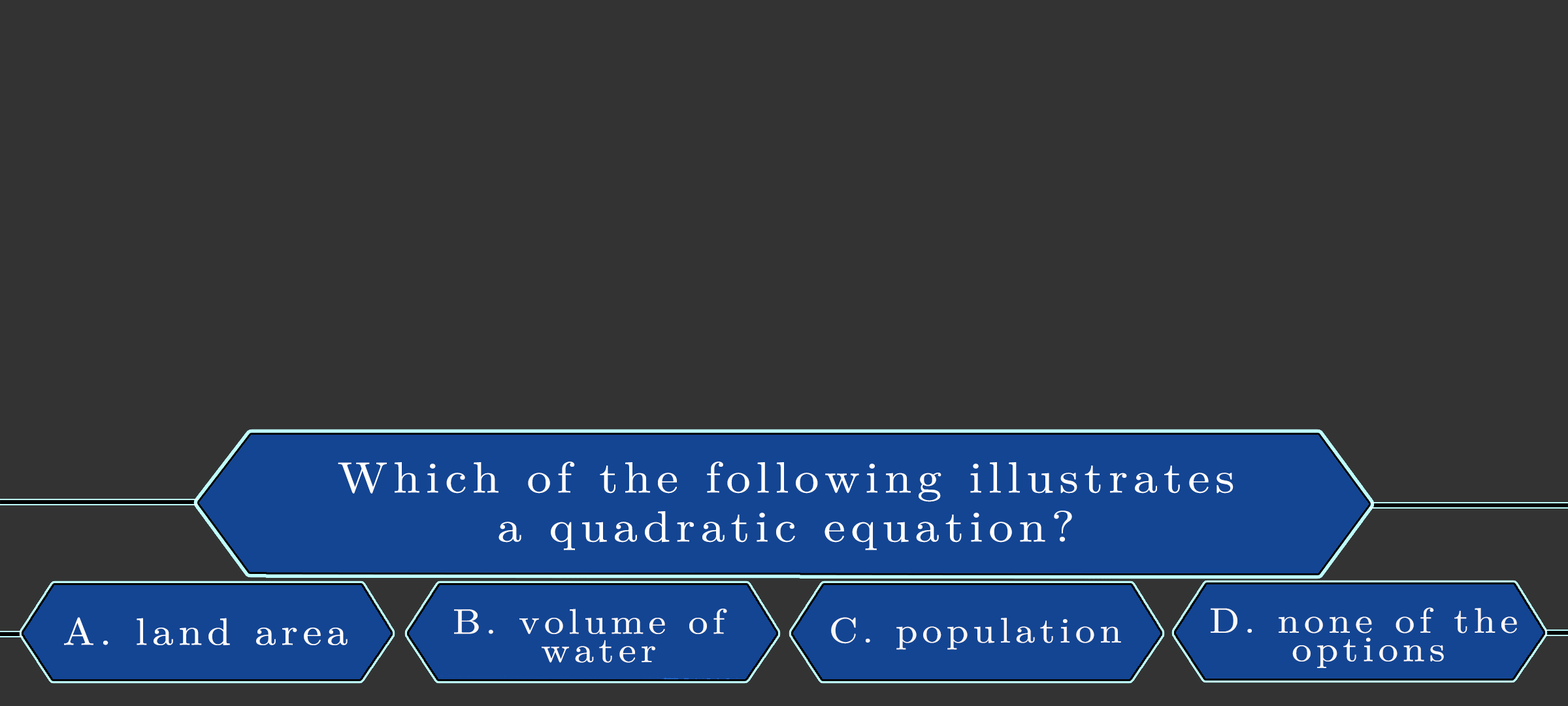
<style>
.page{position:relative;width:1568px;height:706px;background:#333333}
.page>*{position:absolute;margin:0}
.t1{font:43.6px/49px "LatinModernMath-Regular";letter-spacing:0.115em;color:#ffffff;scale:1.12 1}
.t2{font:38.1px "LatinModernMath-Regular";letter-spacing:0.115em;color:#fffefe;scale:1.12 1}
.t3{font:35.4px/28.4px "LatinModernMath-Regular";letter-spacing:0.115em;color:#fdf9f9;scale:1.12 1}
.t4{font:35.4px "LatinModernMath-Regular";letter-spacing:0.115em;color:#fcf7f7;scale:1.12 1}
.t5{font:35.4px "LatinModernMath-Regular";letter-spacing:0.115em;color:#fcf7f7;text-transform:uppercase;scale:1.12 1}
.t6{font:35.4px/28.4px "LatinModernMath-Regular";letter-spacing:0.115em;color:#fbf8f8;scale:1.12 1}
</style>
<div class="page">
<p class="t1" style="left:338px;top:461px;width:895px;height:89px;text-align:center">Which of the following illustrates<br>a quadratic equation?</p>
<p class="t2" style="left:64px;top:617px;width:284px;height:28px">A. land area</p>
<p class="t3" style="left:454px;top:608px;width:273px;height:54px">B. volume of<br>    water</p>
<p class="t4" style="left:831px;top:617px;width:290px;height:32px"><span class="t5">c.</span> population</p>
<p class="t6" style="left:1211px;top:607px;width:306px;height:61px">D. none of the<br>    options</p>
</div>
